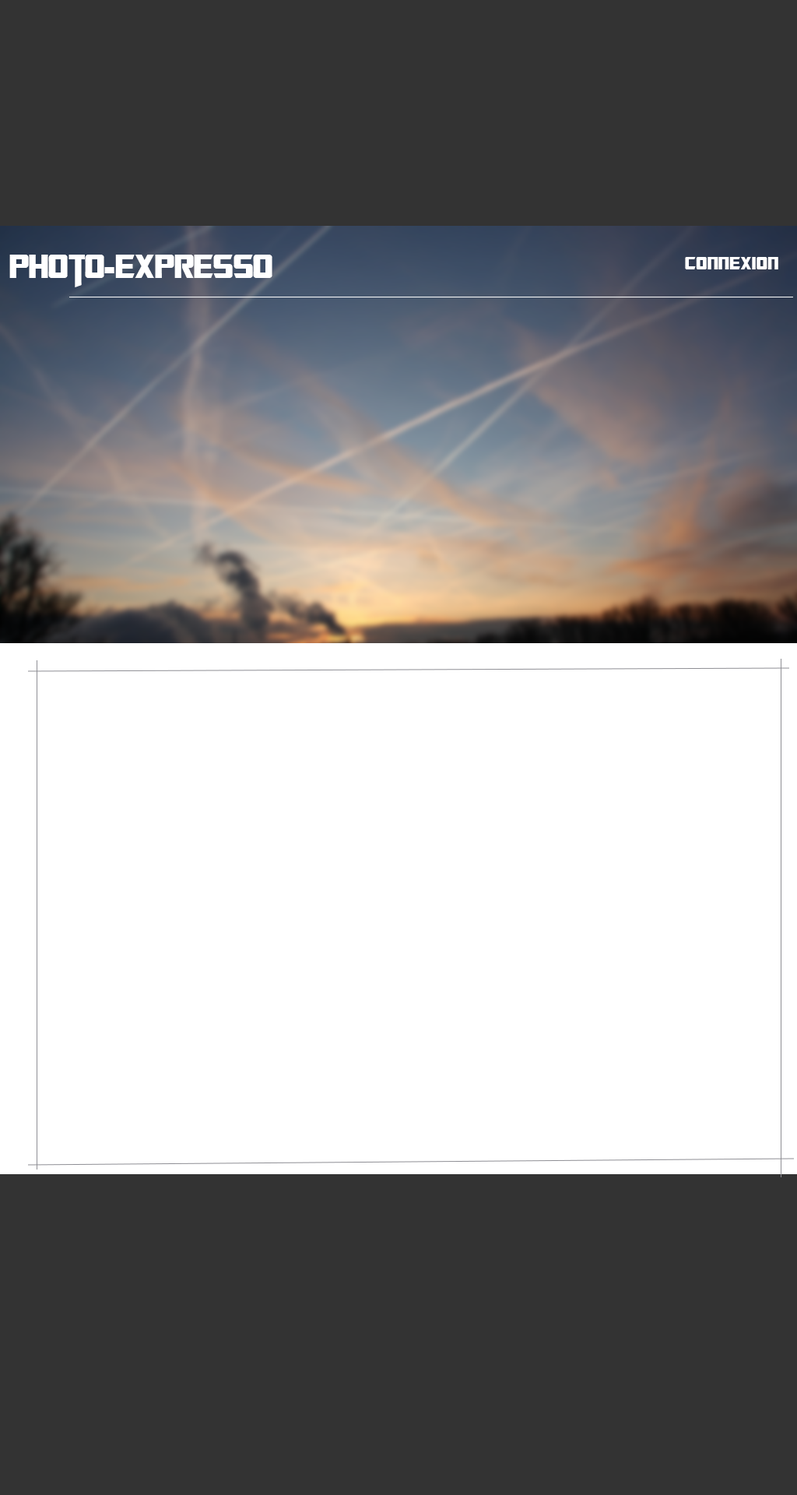
<style>
.page{position:relative;width:797px;height:1495px;background:#333333}
.page>*{position:absolute;margin:0}
.t1{font:37.4px "TransformersMovie";color:#ffffff}
.t2{font:20.2px "TransformersMovie";letter-spacing:0.025em;color:#ffffff}
</style>
<div class="page">
<p class="t1" style="left:9px;top:255px;width:264px;height:32px">Photo-Expresso</p>
<p class="t2" style="left:685px;top:257px;width:94px;height:12px">Connexion</p>
</div>
